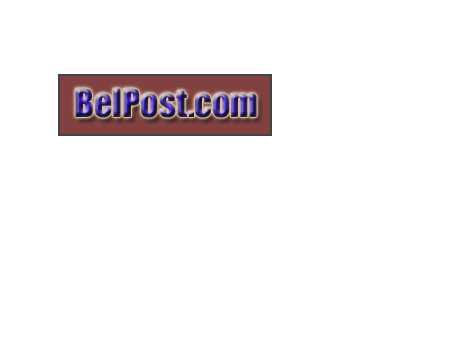
<style>
.page{position:relative;width:454px;height:340px;background:#ffffff}
.page>*{position:absolute;margin:0}
.t1{font:36px "Impact"}
</style>
<div class="page">
<p class="t1" style="left:75px;top:88px;width:182px;height:30px">BelPost.com</p>
</div>
